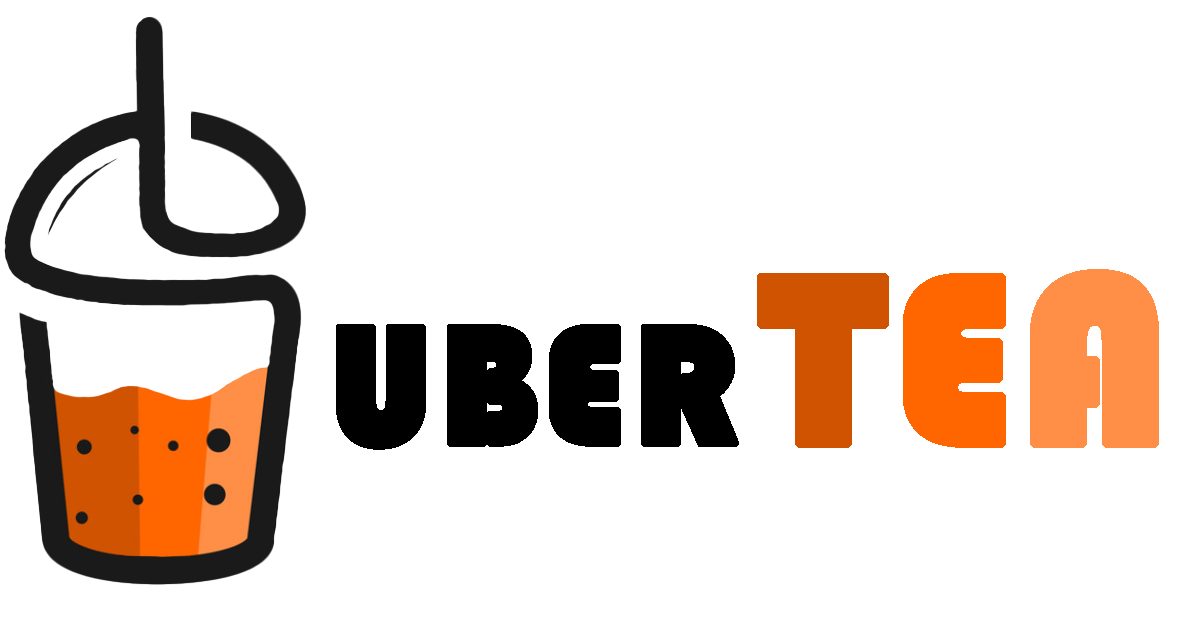
<style>
.page{position:relative;width:1200px;height:620px;background:#ffffff}
.page>*{position:absolute;margin:0}
.t1{font:175px "Bauhaus93";color:#000000;font-weight:bold}
.t2{font:250px "Bauhaus93";color:#d05301;font-weight:bold}
.t3{font:250px "Bauhaus93";color:#ff6600;font-weight:bold}
.t4{font:250px "Bauhaus93";color:#ff8f47;font-weight:bold}
</style>
<div class="page">
<p class="t1" style="left:336px;top:269px;width:823px;height:181px">UBER <span class="t2">T</span><span class="t3">E</span><span class="t4">A</span></p>
</div>
